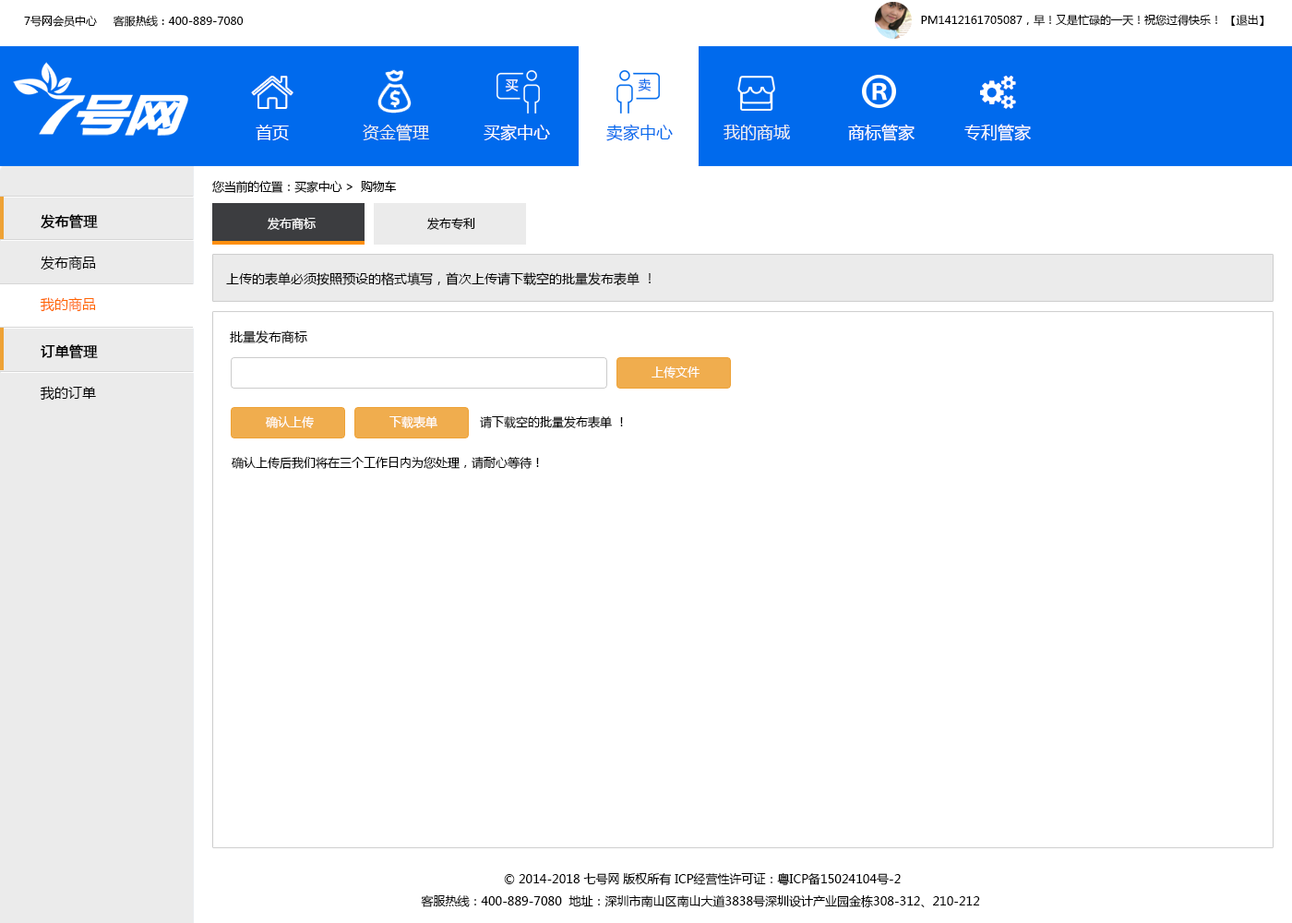
<style>
.page{position:relative;width:1292px;height:923px;background:#ffffff}
.page>*{position:absolute;margin:0}
.t1{font:11.1px "MicrosoftYaHei";color:#000000}
.t2{font:12.9px "MicrosoftYaHei";color:#ffffff}
.t3{font:12.9px "MicrosoftYaHei";color:#006aed}
.t4{font:16.6px "MicrosoftYaHei";color:#ffffff}
.t5{font:16.6px "MicrosoftYaHei";color:#ecf0f1}
.t6{font:16.6px "MicrosoftYaHei";color:#006aed}
.t7{font:12px "MicrosoftYaHei";letter-spacing:-0.02em;color:#000000}
.t8{font:13.8px/41.5px "MicrosoftYaHei";color:#000000;font-weight:bold}
.t9{font:13.8px/41.5px "MicrosoftYaHei";color:#000000}
.t10{font:13.8px/41.5px "MicrosoftYaHei";color:#ff6600}
.t11{font:12px "MicrosoftYaHei";color:#ffffff}
.t12{font:12px "MicrosoftYaHei";color:#000000}
.t13{font:12.9px "MicrosoftYaHei";color:#000000}
.t14{font:12px/22.1px "MicrosoftYaHei";color:#000000}
</style>
<div class="page">
<p class="t1" style="left:24px;top:15px;width:220px;height:12px">7号网会员中心     客服热线：400-889-7080</p>
<p class="t1" style="left:921px;top:15px;width:343px;height:11px">PM1412161705087，早！又是忙碌的一天！祝您过得快乐！ 【退出】</p>
<p class="t2" style="left:505px;top:79px;width:14px;height:13px">买</p>
<p class="t3" style="left:638px;top:78px;width:14px;height:13px">卖</p>
<p class="t4" style="left:256px;top:125px;width:33px;height:15px">首页</p>
<p class="t5" style="left:363px;top:124px;width:66px;height:17px">资金管理</p>
<p class="t4" style="left:484px;top:124px;width:66px;height:17px">买家中心</p>
<p class="t6" style="left:606px;top:124px;width:67px;height:17px">卖家中心</p>
<p class="t5" style="left:724px;top:125px;width:66px;height:15px">我的商城</p>
<p class="t4" style="left:848px;top:124px;width:67px;height:17px">商标管家</p>
<p class="t4" style="left:964px;top:124px;width:67px;height:17px">专利管家</p>
<p class="t7" style="left:212px;top:180px;width:185px;height:13px">您当前的位置：买家中心 &gt;  购物车</p>
<p class="t8" style="left:40px;top:214px;width:58px;height:98px">发布管理<br><span class="t9">发布商品<br></span><span class="t10">我的商品</span></p>
<p class="t11" style="left:268px;top:217px;width:48px;height:13px">发布商标</p>
<p class="t12" style="left:427px;top:217px;width:48px;height:13px">发布专利</p>
<p class="t13" style="left:226px;top:272px;width:425px;height:14px">上传的表单必须按照预设的格式填写，首次上传请下载空的批量发布表单 ！</p>
<p class="t13" style="left:230px;top:330px;width:77px;height:13px">批量发布商标</p>
<p class="t8" style="left:40px;top:344px;width:58px;height:57px">订单管理<br><span class="t9">我的订单</span></p>
<p class="t11" style="left:652px;top:366px;width:48px;height:12px">上传文件</p>
<p class="t11" style="left:265px;top:416px;width:49px;height:12px">确认上传</p>
<p class="t11" style="left:389px;top:415px;width:48px;height:13px">下载表单</p>
<p class="t12" style="left:480px;top:415px;width:143px;height:13px">请下载空的批量发布表单 ！</p>
<p class="t12" style="left:231px;top:456px;width:308px;height:13px">确认上传后我们将在三个工作日内为您处理，请耐心等待！</p>
<p class="t14" style="left:421px;top:872px;width:559px;height:35px;text-align:center">© 2014-2018 七号网 版权所有 ICP经营性许可证：粤ICP备15024104号-2<br>客服热线：400-889-7080  地址：深圳市南山区南山大道3838号深圳设计产业园金栋308-312、210-212</p>
</div>
